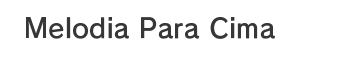
<style>
.page{position:relative;width:342px;height:60px;background:#ffffff}
.page>*{position:absolute;margin:0}
.t1{font:26.7px "RodinPro-DB";letter-spacing:0.008em;color:#383738}
</style>
<div class="page">
<p class="t1" style="left:26px;top:17px;width:249px;height:22px">Melodia Para Cima</p>
</div>
